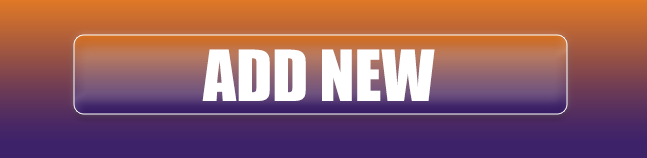
<style>
.page{position:relative;width:647px;height:158px}
.page>*{position:absolute;margin:0}
.t1{font:65px "Impact";color:#ffffff}
</style>
<div class="page">
<p class="t1" style="left:202px;top:49px;width:233px;height:52px">ADD NEW</p>
</div>
